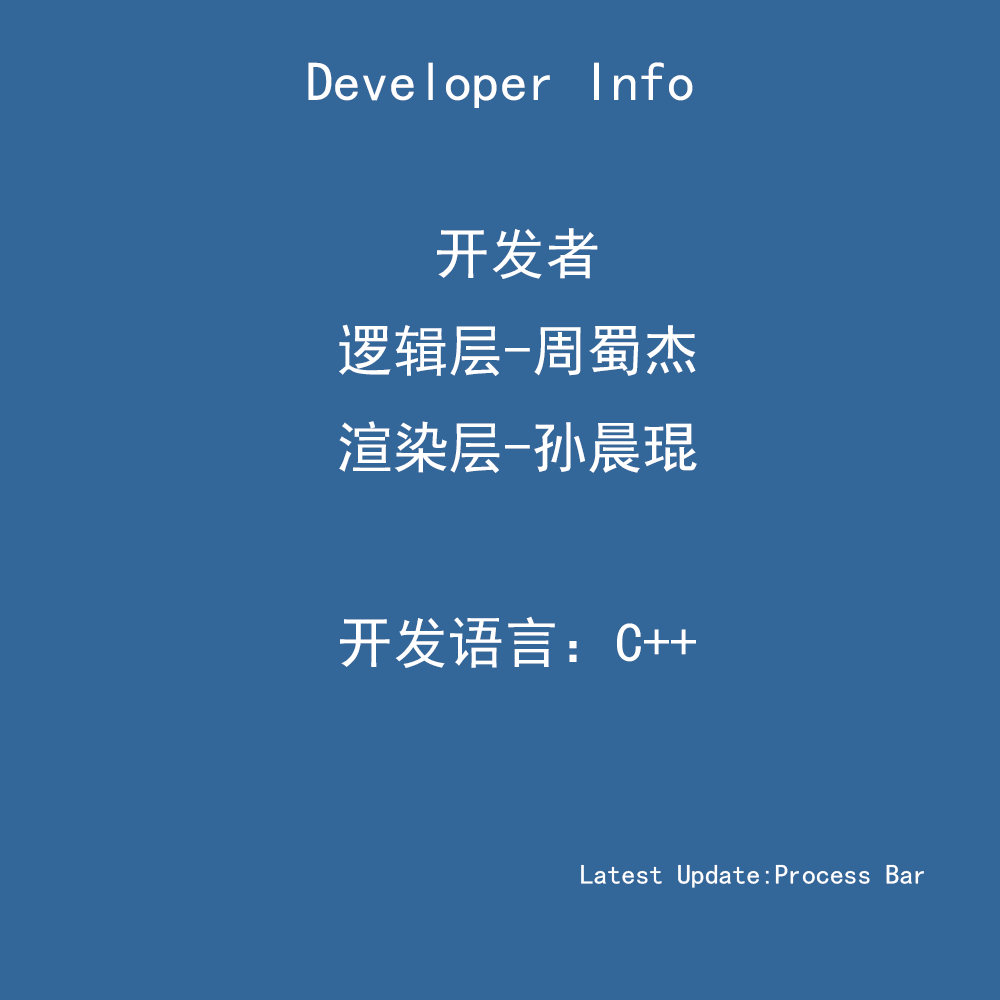
<style>
.page{position:relative;width:1000px;height:1000px;background:#336699}
.page>*{position:absolute;margin:0}
.t1{font:55.6px "SimHei";color:#ffffff}
.t2{font:27.8px "SimHei";color:#ffffff}
</style>
<div class="page">
<p class="t1" style="left:308px;top:62px;width:385px;height:46px">Developer Info</p>
<p class="t1" style="left:339px;top:228px;width:358px;height:440px;text-align:center">开发者<br>逻辑层-周蜀杰<br>渲染层-孙晨琨<br><br>开发语言：C++</p>
<p class="t2" style="left:581px;top:864px;width:343px;height:24px">Latest Update:Process Bar</p>
</div>
